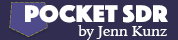
<style>
.page{position:relative;width:178px;height:40px;background:#302d51}
.page>*{position:absolute;margin:0}
.t1{font:25px "Phosphate-Solid";color:#ffffff;scale:1.07 1}
.t2{font:14px "IowanOldStyle-Roman";color:#ffffff;scale:1.07 1}
</style>
<div class="page">
<p class="t1" style="left:25px;top:5px;width:143px;height:18px">Pocket SDR</p>
<p class="t2" style="left:78px;top:25px;width:89px;height:15px">by Jenn Kunz</p>
</div>
